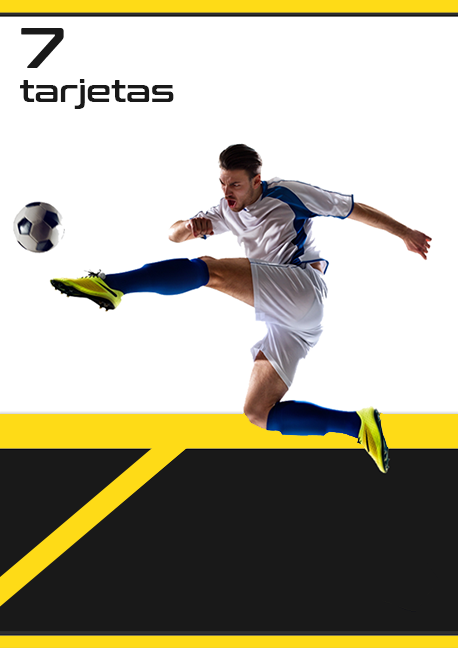
<style>
.page{position:relative;width:458px;height:648px;background:#ffffff}
.page>*{position:absolute;margin:0}
.t1{font:31.2px "ConthraxSb-Regular";color:#191919}
</style>
<div class="page">
<p class="t1" style="left:20px;top:79px;width:154px;height:30px">tarjetas</p>
</div>
